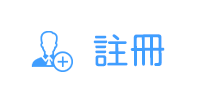
<style>
.page{position:relative;width:220px;height:100px;background:#ffffff}
.page>*{position:absolute;margin:0}
.t1{font:37.5px "jf-openhuninn-1.1";color:#3f9eff}
</style>
<div class="page">
<p class="t1" style="left:93px;top:34px;width:72px;height:33px">註冊</p>
</div>
